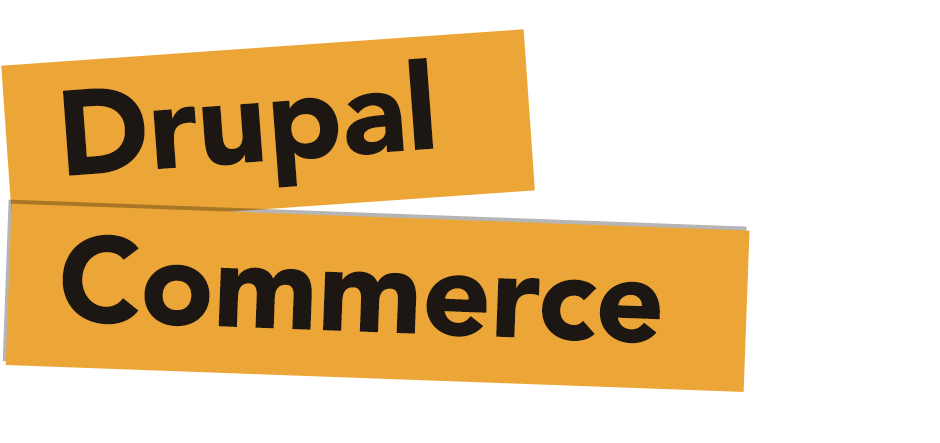
<style>
.page{position:relative;width:940px;height:443px;background:#ffffff}
.page>*{position:absolute;margin:0}
.t1{font:120px "Avenir-Black";color:#1d1714}
</style>
<div class="page">
<p class="t1" style="left:63px;top:58px;width:371px;height:130px;rotate:-4deg">Drupal</p>
<p class="t1" style="left:62px;top:234px;width:598px;height:110px;rotate:2deg">Commerce</p>
</div>
